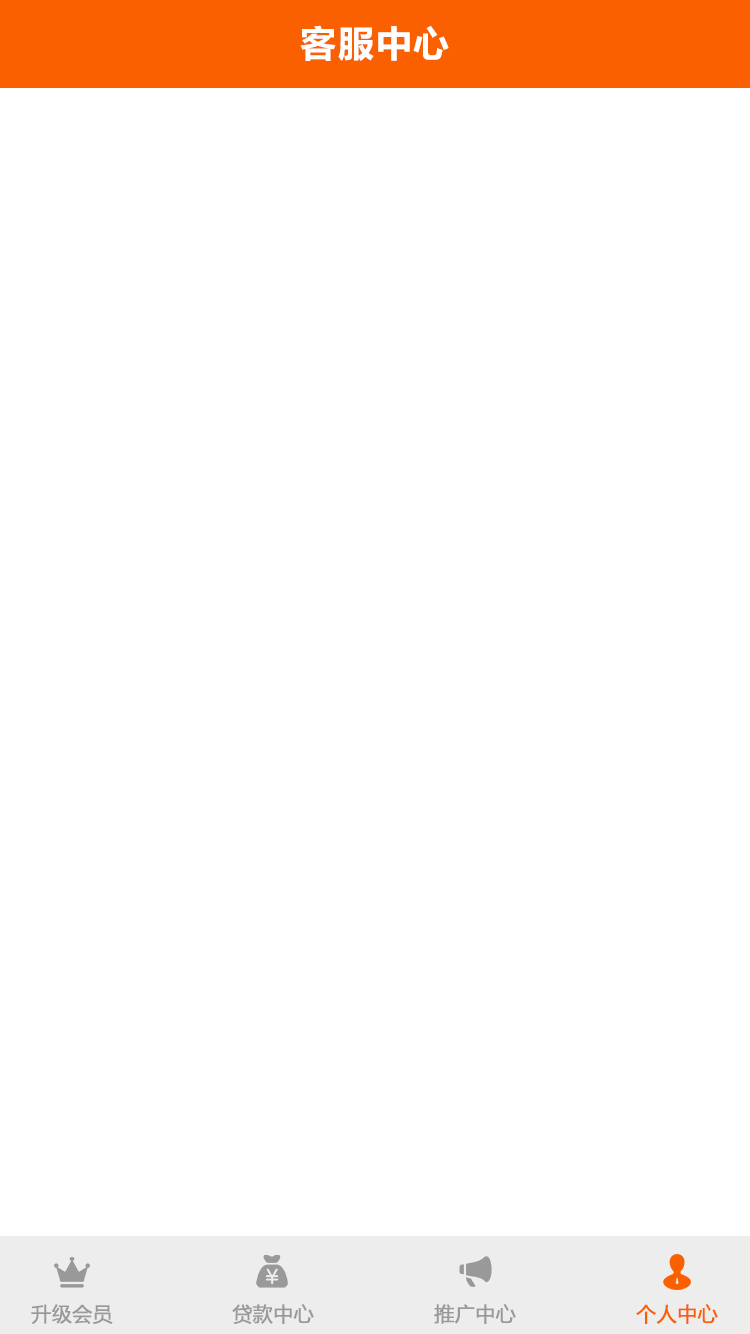
<style>
.page{position:relative;width:750px;height:1334px;background:#ffffff}
.page>*{position:absolute;margin:0}
.t1{font:36px "MicrosoftYaHei-Bold";letter-spacing:0.05em;color:#ffffff}
.t2{font:20px "MicrosoftYaHei";color:#999999;font-weight:bold}
.t3{font:20px "MicrosoftYaHei";color:#fb6000;font-weight:bold}
</style>
<div class="page">
<p class="t1" style="left:300px;top:25px;width:149px;height:36px">客服中心</p>
<p class="t2" style="left:31px;top:1304px;width:82px;height:20px">升级会员</p>
<p class="t2" style="left:232px;top:1304px;width:82px;height:20px">贷款中心</p>
<p class="t2" style="left:434px;top:1304px;width:82px;height:20px">推广中心</p>
<p class="t3" style="left:636px;top:1304px;width:82px;height:20px">个人中心</p>
</div>
